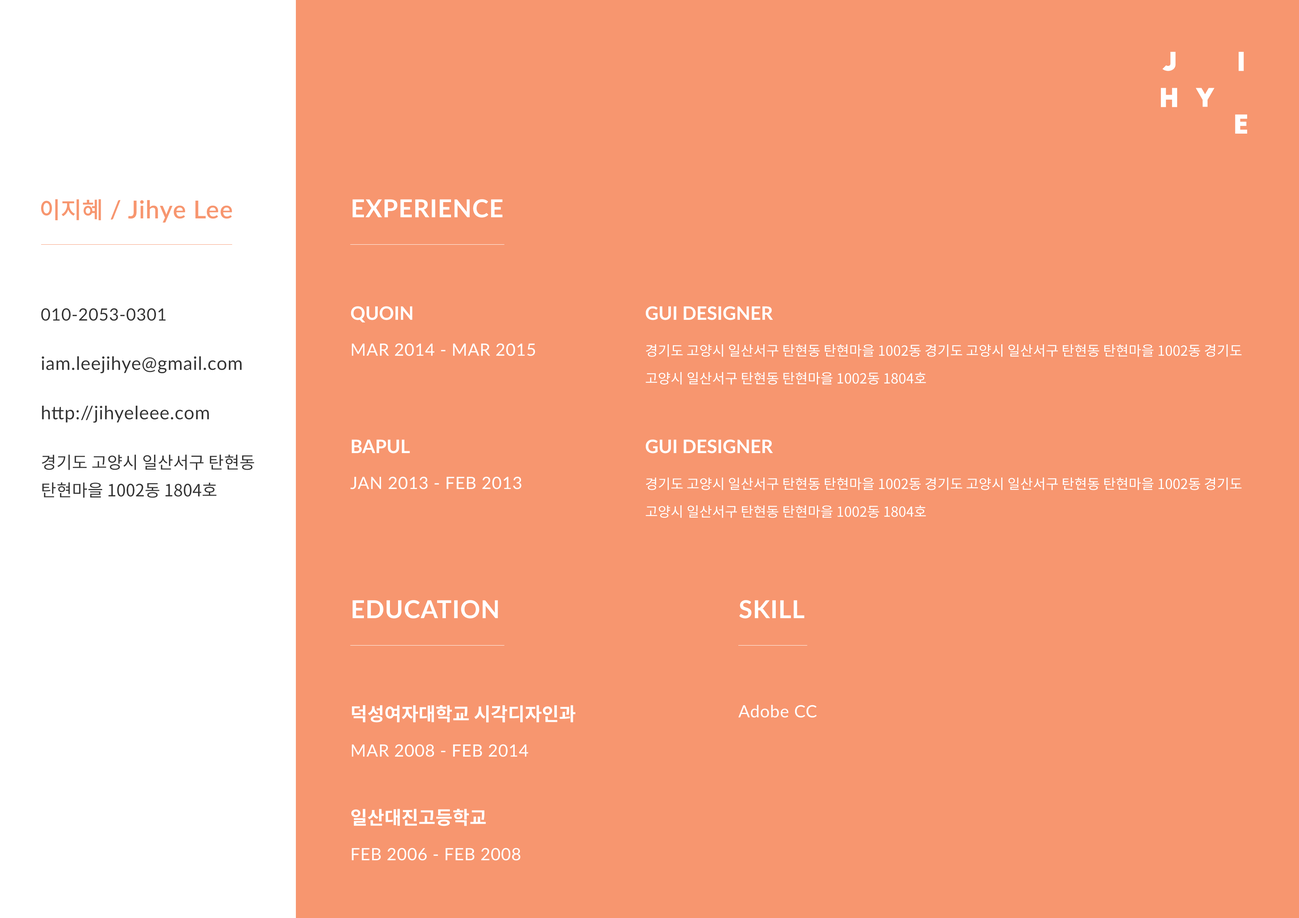
<style>
.page{position:relative;width:1299px;height:918px;background:#f7966f}
.page>*{position:absolute;margin:0}
.t1{font:24.7px "Lato-Semibold";letter-spacing:0.025em;color:#f7966f}
.t2{font:23.1px "NotoSansKR-Medium";color:#f7966f}
.t3{font:24.7px "Lato-Bold";letter-spacing:0.025em;color:#ffffff}
.t4{font:18.5px/49.4px "Lato-Regular";letter-spacing:0.025em;color:#343434}
.t5{font:17px/49.4px "Lato-Regular";letter-spacing:0.025em;color:#343434}
.t6{font:17px/49.4px "NotoSansKR-Regular";color:#343434}
.t7{font:17px/27.8px "NotoSansKR-Regular";color:#343434}
.t8{font:18.5px "Lato-Bold";color:#ffffff}
.t9{font:17px "Lato-Regular";letter-spacing:0.025em;color:#ffffff}
.t10{font:13.9px/27.8px "NotoSansKR-Regular";color:#ffffff}
.t11{font:13.9px/49.4px "NotoSansKR-Regular";color:#ffffff}
.t12{font:18.5px "NotoSansKR-Bold";color:#ffffff}
</style>
<div class="page">
<p class="t1" style="left:41px;top:199px;width:191px;height:24px"><span class="t2">이지혜</span> / Jihye Lee</p>
<p class="t3" style="left:352px;top:199px;width:150px;height:19px">EXPERIENCE</p>
<p class="t4" style="left:41px;top:308px;width:213px;height:190px"><span class="t5">010-2053-0301<br></span>iam.leejihye@gmail.com<br>http://jihyeleee.com<br><span class="t6">경기도 고양시 일산서구 탄현</span><span class="t7">동<br>탄현마을 1002동 1804호</span></p>
<p class="t8" style="left:351px;top:306px;width:61px;height:16px">QUOIN</p>
<p class="t8" style="left:646px;top:306px;width:127px;height:14px">GUI DESIGNER</p>
<p class="t9" style="left:352px;top:343px;width:183px;height:13px">MAR 2014 - MAR 2015</p>
<p class="t10" style="left:646px;top:344px;width:595px;height:41px"><span class="t11">경기도 고양시 일산서구 탄현</span>동 탄현마을 1002동 <span class="t11">경기도 고양시 일산서구 탄현</span>동 탄현마을 1002동 경기도<br>고양시 일산서구 탄현동 탄현마을 1002동 1804호</p>
<p class="t8" style="left:352px;top:439px;width:58px;height:15px">BAPUL</p>
<p class="t8" style="left:646px;top:439px;width:127px;height:15px">GUI DESIGNER</p>
<p class="t9" style="left:350px;top:476px;width:171px;height:13px">JAN 2013 - FEB 2013</p>
<p class="t10" style="left:646px;top:478px;width:595px;height:40px"><span class="t11">경기도 고양시 일산서구 탄현</span>동 탄현마을 1002동 <span class="t11">경기도 고양시 일산서구 탄현</span>동 탄현마을 1002동 경기도<br>고양시 일산서구 탄현동 탄현마을 1002동 1804호</p>
<p class="t3" style="left:352px;top:600px;width:146px;height:19px">EDUCATION</p>
<p class="t3" style="left:739px;top:600px;width:65px;height:19px">SKILL</p>
<p class="t12" style="left:352px;top:705px;width:223px;height:18px">덕성여자대학교 시각디자인과</p>
<p class="t9" style="left:738px;top:705px;width:79px;height:13px">Adobe CC</p>
<p class="t9" style="left:352px;top:744px;width:176px;height:13px">MAR 2008 - FEB 2014</p>
<p class="t12" style="left:351px;top:809px;width:135px;height:17px">일산대진고등학교</p>
<p class="t9" style="left:352px;top:848px;width:168px;height:13px">FEB 2006 - FEB 2008</p>
</div>
